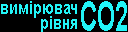
<style>
.page{position:relative;width:128px;height:32px;background:#000000}
.page>*{position:absolute;margin:0}
.t1{font:17.7px "Arial-BoldMT";color:#22f4f7;scale:0.79 1}
.t2{font:40.6px "Arial-BoldMT";color:#22f4f7;scale:0.59 1}
</style>
<div class="page">
<p class="t1" style="left:1px;top:1px;width:76px;height:17px">вимірювач</p>
<p class="t2" style="left:81px;top:1px;width:46px;height:30px">CO2</p>
<p class="t1" style="left:41px;top:16px;width:36px;height:17px">рівня</p>
</div>
